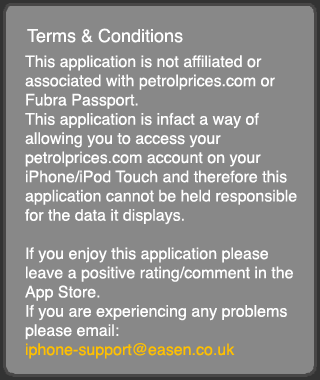
<style>
.page{position:relative;width:320px;height:380px;background:#888888}
.page>*{position:absolute;margin:0}
.t1{font:18px "Helvetica";color:#ffffff}
.t2{font:16px "Helvetica";color:#ffffff}
.t3{font:16px "Helvetica";color:#ffc000}
</style>
<div class="page">
<p class="t1" style="left:27px;top:28px;width:156px;height:15px">Terms &amp; Conditions</p>
<p class="t2" style="left:25px;top:55px;width:272px;height:304px">This application is not affiliated or<br>associated with petrolprices.com or <br>Fubra Passport.<br>This application is infact a way of <br>allowing you to access your <br>petrolprices.com account on your <br>iPhone/iPod Touch and therefore this<br>application cannot be held responsible<br>for the data it displays.<br><br>If you enjoy this application please<br>leave a positive rating/comment in the <br>App Store.<br>If you are experiencing any problems<br>please email:<br><span class="t3">iphone-support@easen.co.uk</span></p>
</div>
